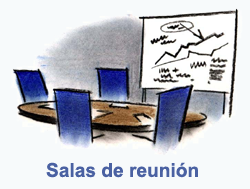
<style>
.page{position:relative;width:250px;height:189px;background:#f7fafb}
.page>*{position:absolute;margin:0}
.t1{font:19.1px "Arial-BoldMT";color:#4a61a2}
</style>
<div class="page">
<p class="t1" style="left:46px;top:162px;width:152px;height:16px">Salas de reunión</p>
</div>
